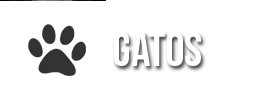
<style>
.page{position:relative;width:256px;height:106px;background:#ffffff}
.page>*{position:absolute;margin:0}
.t1{font:47.6px "BebasNeue-Regular";color:#ffffff}
</style>
<div class="page">
<p class="t1" style="left:113px;top:32px;width:88px;height:34px">gatos</p>
</div>
